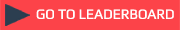
<style>
.page{position:relative;width:180px;height:30px;background:#fc4349}
.page>*{position:absolute;margin:0}
.t1{font:14px "Play";color:#ffffff}
</style>
<div class="page">
<p class="t1" style="left:36px;top:9px;width:138px;height:10px">GO TO LEADERBOARD</p>
</div>
